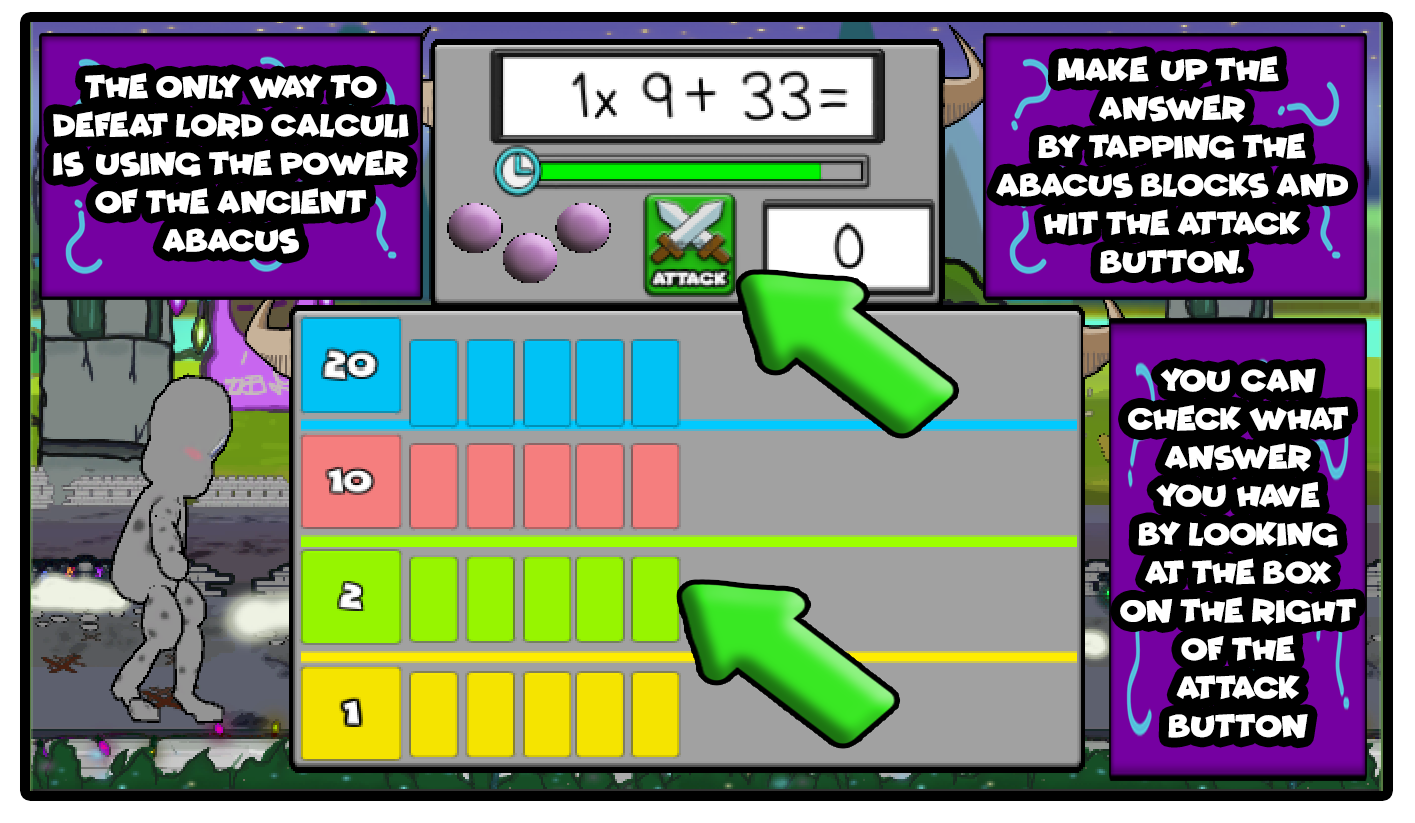
<style>
.page{position:relative;width:1415px;height:823px}
.page>*{position:absolute;margin:0}
.t1{font:12px "Funhouse";color:#ffffff}
.t2{font:32px "Funhouse";color:#ffffff}
</style>
<div class="page">
<p class="t1" style="left:996px;top:56px;width:352px;height:218px;text-align:center">make up the <br>answer<br>by tapping the<br>abacus blocks and<br>hit the attack<br>button.</p>
<p class="t2" style="left:53px;top:73px;width:356px;height:181px;text-align:center">THE ONLY WAY TO<br>DEFEAT LORD CALCULI<br>IS USING THE POWER<br>OF THE ANCIENT<br>ABACUS</p>
<p class="t1" style="left:1120px;top:368px;width:236px;height:371px;text-align:center">you can<br>check what<br>answer<br>you have<br>by looking<br>at the box<br>on the right<br>of the<br>attack<br>button</p>
</div>
